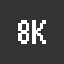
<style>
.page{position:relative;width:64px;height:64px;background:#333333}
.page>*{position:absolute;margin:0}
.t1{font:40.9px "Glasstown-NBP";letter-spacing:0.005em;color:#ffffff;font-weight:bold}
</style>
<div class="page">
<p class="t1" style="left:18px;top:20px;width:28px;height:24px">8K</p>
</div>
